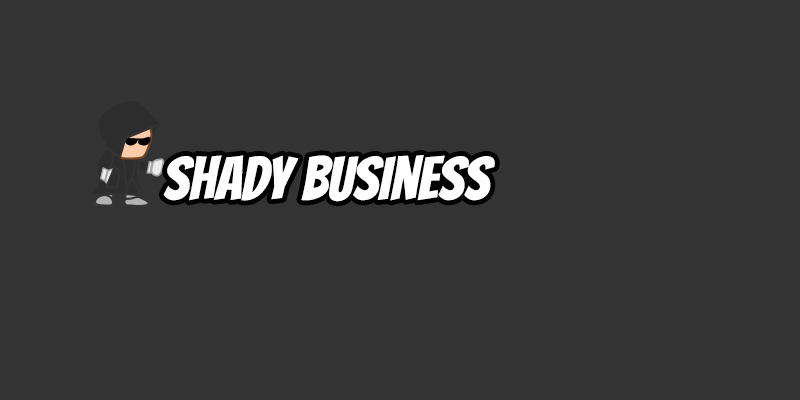
<style>
.page{position:relative;width:800px;height:400px;background:#333333}
.page>*{position:absolute;margin:0}
.t1{font:60px "Bangers-Regular";color:#ffffff}
</style>
<div class="page">
<p class="t1" style="left:163px;top:155px;width:332px;height:47px">Shady Business</p>
</div>
